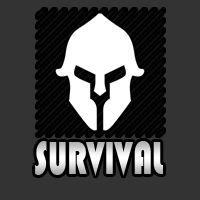
<style>
.page{position:relative;width:200px;height:200px;background:#333333}
.page>*{position:absolute;margin:0}
.t1{font:48px "Bauhaus93";scale:0.69 1}
</style>
<div class="page">
<p class="t1" style="left:35px;top:141px;width:128px;height:35px">SURVIVAL</p>
</div>
